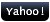
<style>
.page{position:relative;width:50px;height:22px;background:#000000}
.page>*{position:absolute;margin:0}
.t1{font:11px "LucidaConsole";color:#ffffff}
</style>
<div class="page">
<p class="t1" style="left:6px;top:6px;width:38px;height:9px">Yahoo!</p>
</div>
